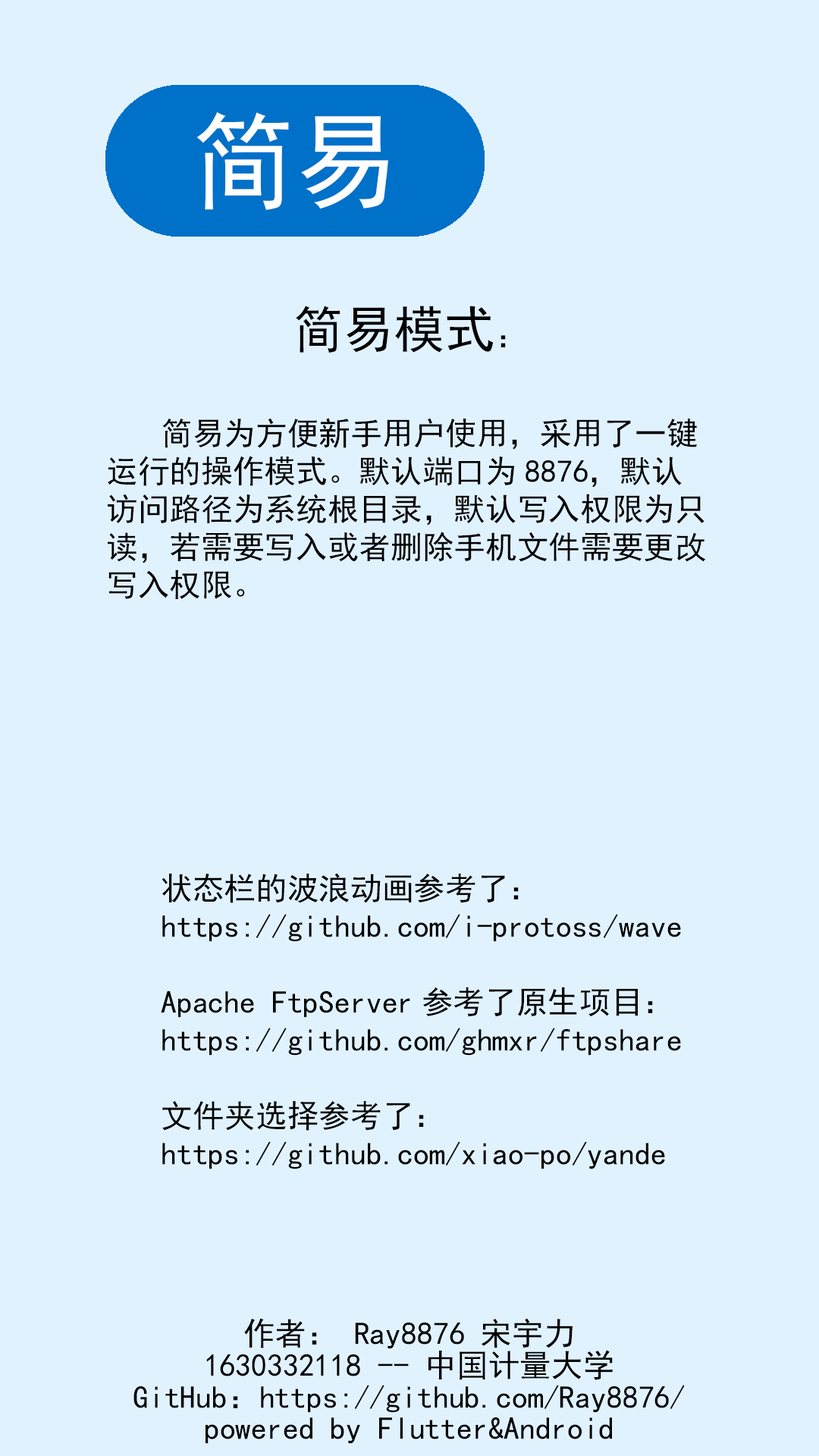
<style>
.page{position:relative;width:819px;height:1456px;background:#e1f2ff}
.page>*{position:absolute;margin:0}
.t1{font:105.3px "SimHei";color:#ffffff}
.t2{font:31.6px/37.9px "SimHei";color:#000000}
.t3{font:50.6px/37.9px "SimHei";color:#000000}
.t4{font:31.6px/31.6px "SimHei";color:#000000}
</style>
<div class="page">
<p class="t1" style="left:196px;top:111px;width:192px;height:99px">简易</p>
<p class="t2" style="left:108px;top:306px;width:598px;height:863px;text-align:center"><span class="t3">简易模式</span>：<br><br><br>  简易为方便新手用户使用，采用了一键运行的操作模式。默认端口为8876，默认访问路径为系统根目录，默认写入权限为只读，若需要写入或者删除手机文件需要更改写入权限。<br><br><br><br><br><br><br><br>  状态栏的波浪动画参考了：<br>  https://github.com/i-protoss/wave<br>  <br>  Apache FtpServer参考了原生项目：<br>  https://github.com/ghmxr/ftpshare<br><br>  文件夹选择参考了：<br>  https://github.com/xiao-po/yande</p>
<p class="t4" style="left:133px;top:1318px;width:552px;height:126px;text-align:center">作者： Ray8876 宋宇力<br>1630332118 -- 中国计量大学<br>GitHub：https://github.com/Ray8876/<br>powered by Flutter&amp;Android</p>
</div>
